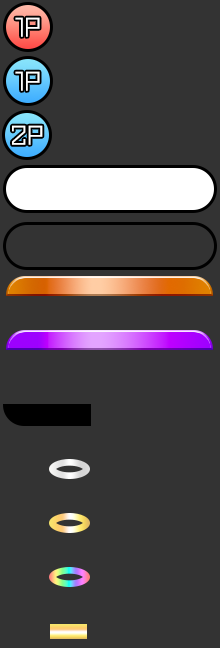
<style>
.page{position:relative;width:220px;height:648px;background:#333333}
.page>*{position:absolute;margin:0}
.t1{font:23.6px "Makinas-4-Square";color:#ffffff}
</style>
<div class="page">
<p class="t1" style="left:15px;top:17px;width:25px;height:20px">1P</p>
<p class="t1" style="left:15px;top:71px;width:25px;height:20px">1P</p>
<p class="t1" style="left:12px;top:125px;width:31px;height:20px">2P</p>
</div>
